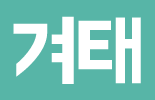
<style>
.page{position:relative;width:155px;height:100px;background:#57b5a7}
.page>*{position:absolute;margin:0}
.t1{font:80px "BMHANNA";color:#ffffff}
</style>
<div class="page">
<p class="t1" style="left:13px;top:16px;width:128px;height:68px">겨태</p>
</div>
